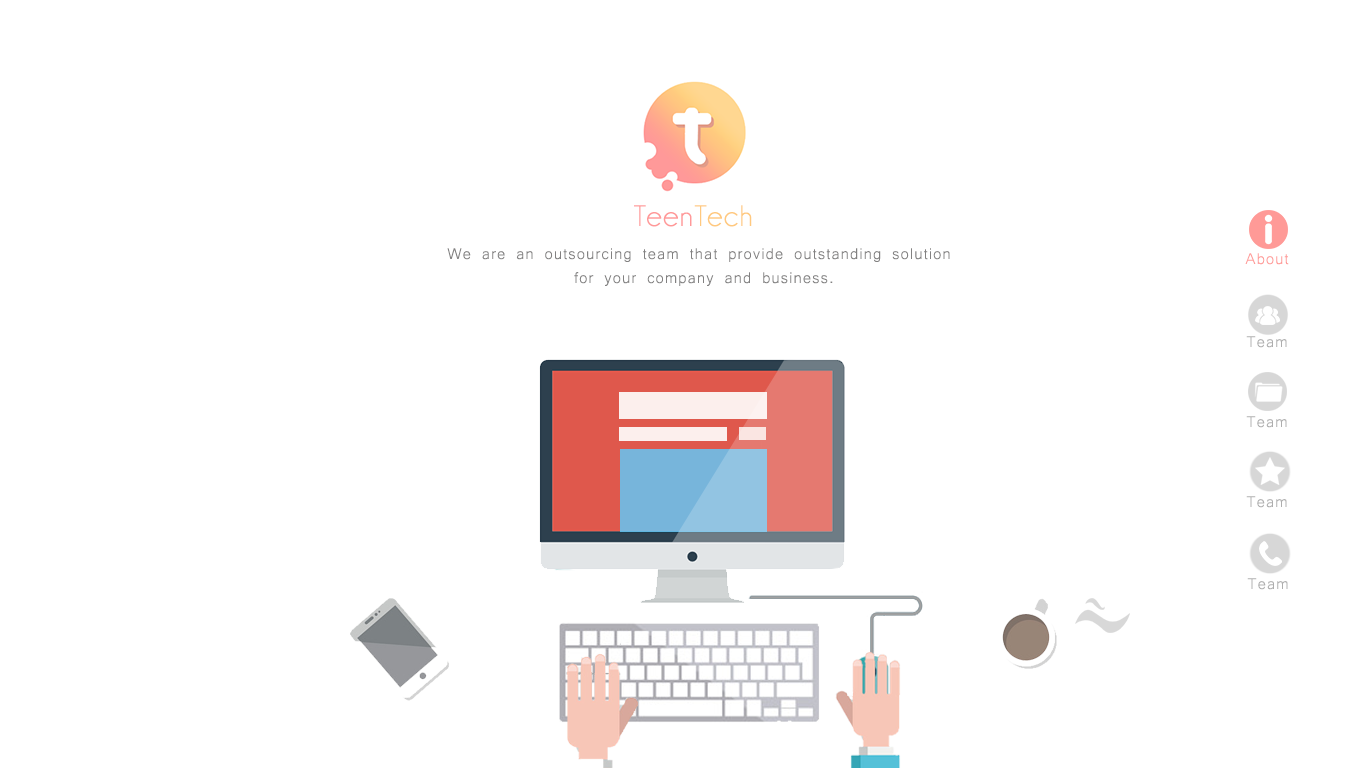
<style>
.page{position:relative;width:1366px;height:768px;background:#ffffff}
.page>*{position:absolute;margin:0}
.t1{font:30px "Champagne&Limousines";letter-spacing:0.05em;color:#ff9999}
.t2{font:30px "Champagne&Limousines";letter-spacing:0.05em;color:#ffc97f}
.t3{font:20px/24px "Microsoft-Yi-Baiti";letter-spacing:0.05em;color:#828181}
.t4{font:20px "Microsoft-Yi-Baiti";letter-spacing:0.05em;color:#ff9a97}
.t5{font:20px "Microsoft-Yi-Baiti";letter-spacing:0.05em;color:#aeaeae}
</style>
<div class="page">
<p class="t1" style="left:634px;top:205px;width:118px;height:22px">Teen<span class="t2">Tech</span></p>
<p class="t3" style="left:447px;top:248px;width:503px;height:38px;text-align:center">We are an outsourcing team that provide outstanding solution<br> for your company and business.</p>
<p class="t4" style="left:1245px;top:253px;width:44px;height:12px">About</p>
<p class="t5" style="left:1246px;top:336px;width:41px;height:12px">Team</p>
<p class="t5" style="left:1246px;top:416px;width:41px;height:12px">Team</p>
<p class="t5" style="left:1246px;top:496px;width:41px;height:12px">Team</p>
<p class="t5" style="left:1247px;top:578px;width:41px;height:12px">Team</p>
</div>
